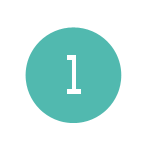
<style>
.page{position:relative;width:150px;height:150px;background:#ffffff}
.page>*{position:absolute;margin:0}
.t1{font:60px "JosefinSlab-Bold";color:#ffffff}
</style>
<div class="page">
<p class="t1" style="left:67px;top:55px;width:14px;height:39px">1</p>
</div>
